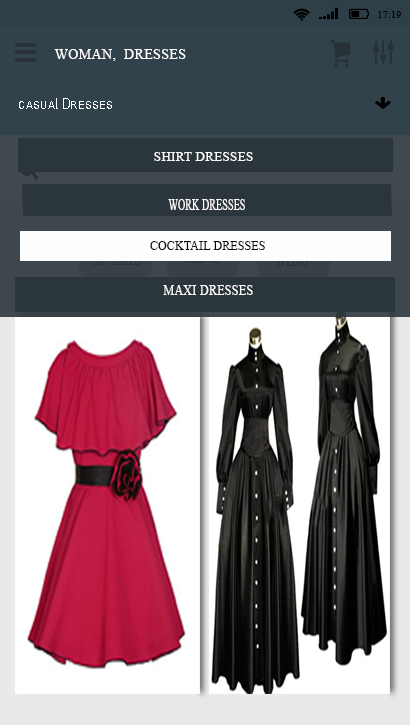
<style>
.page{position:relative;width:410px;height:725px}
.page>*{position:absolute;margin:0}
.t1{font:10px "TimesNewRomanPSMT";letter-spacing:0.025em;color:#000000;text-transform:uppercase}
.t2{font:14px "TimesNewRomanPSMT";letter-spacing:0.025em;color:#ffffff;text-transform:uppercase}
.t3{font:14.9px "ArialMT";letter-spacing:0.025em;color:#ffffff;font-variant:small-caps;scale:0.81 1}
.t4{font:13px "TimesNewRomanPSMT";letter-spacing:0.025em;color:#fefdfd;text-transform:uppercase}
.t5{font:17px "TimesNewRomanPSMT";letter-spacing:0.025em;color:#fefdfd;text-transform:uppercase;scale:0.58 1}
.t6{font:11.8px "TimesNewRomanPSMT";letter-spacing:0.025em;color:#080808;text-transform:uppercase}
.t7{font:13.8px "TimesNewRomanPSMT";letter-spacing:0.025em;color:#fefdfd;text-transform:uppercase;scale:0.87 1}
</style>
<div class="page">
<p class="t1" style="left:378px;top:11px;width:23px;height:7px">17:19</p>
<p class="t2" style="left:54px;top:49px;width:132px;height:12px">Woman,  dresses</p>
<p class="t3" style="left:19px;top:98px;width:93px;height:11px">casual Dresses</p>
<p class="t4" style="left:154px;top:152px;width:99px;height:9px">shirt dresses</p>
<p class="t5" style="left:168px;top:199px;width:77px;height:11px">work dresses</p>
<p class="t6" style="left:150px;top:241px;width:115px;height:9px">cocktail dresses</p>
<p class="t7" style="left:163px;top:285px;width:90px;height:10px">maxi dresses</p>
</div>
